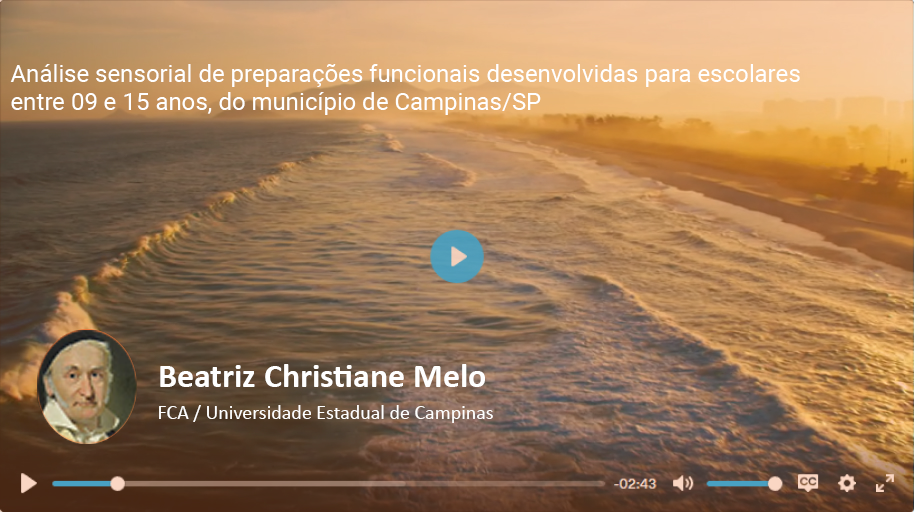
<style>
.page{position:relative;width:914px;height:512px}
.page>*{position:absolute;margin:0}
.t1{font:24px "Roboto-Regular";color:#ffffff}
.t2{font:34px "Calibri-Bold";color:#ffffff}
.t3{font:20px "Calibri";color:#ffffff}
</style>
<div class="page">
<p class="t1" style="left:10px;top:64px;width:790px;height:51px">Análise sensorial de preparações funcionais desenvolvidas para escolares<br>entre 09 e 15 anos, do município de Campinas/SP</p>
<p class="t2" style="left:160px;top:364px;width:325px;height:23px">Beatriz Christiane Melo</p>
<p class="t3" style="left:159px;top:405px;width:334px;height:18px">FCA / Universidade Estadual de Campinas</p>
</div>
